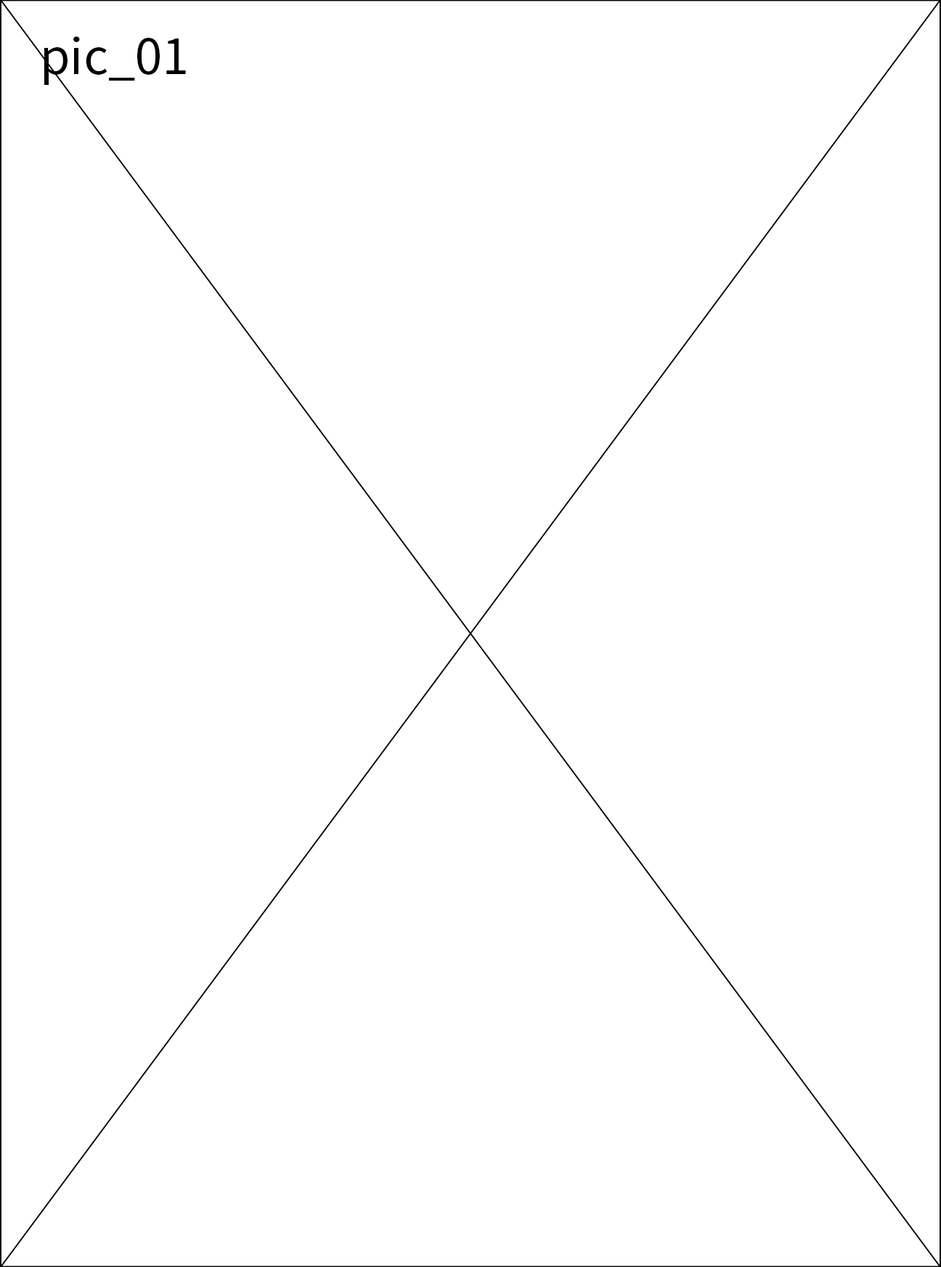
<style>
.page{position:relative;width:941px;height:1267px;background:#ffffff}
.page>*{position:absolute;margin:0}
.t1{font:48.4px "NotoSansCJKkr-Regular";color:#000000}
</style>
<div class="page">
<p class="t1" style="left:44px;top:36px;width:142px;height:49px">pic_01</p>
</div>
